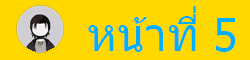
<style>
.page{position:relative;width:250px;height:60px;background:#ffd800}
.page>*{position:absolute;margin:0}
.t1{font:45.1px "Tahoma";color:#00aeff}
</style>
<div class="page">
<p class="t1" style="left:88px;top:6px;width:148px;height:46px">หน้าที่ 5</p>
</div>
